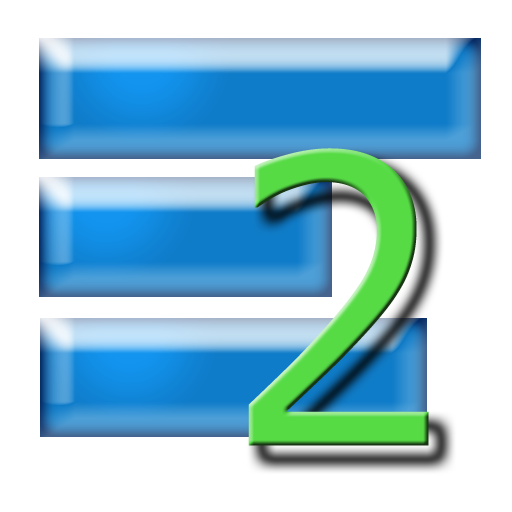
<style>
.page{position:relative;width:512px;height:512px;background:#ffffff}
.page>*{position:absolute;margin:0}
.t1{font:400px "Tahoma";color:#56db45}
</style>
<div class="page">
<p class="t1" style="left:248px;top:148px;width:181px;height:298px">2</p>
</div>
